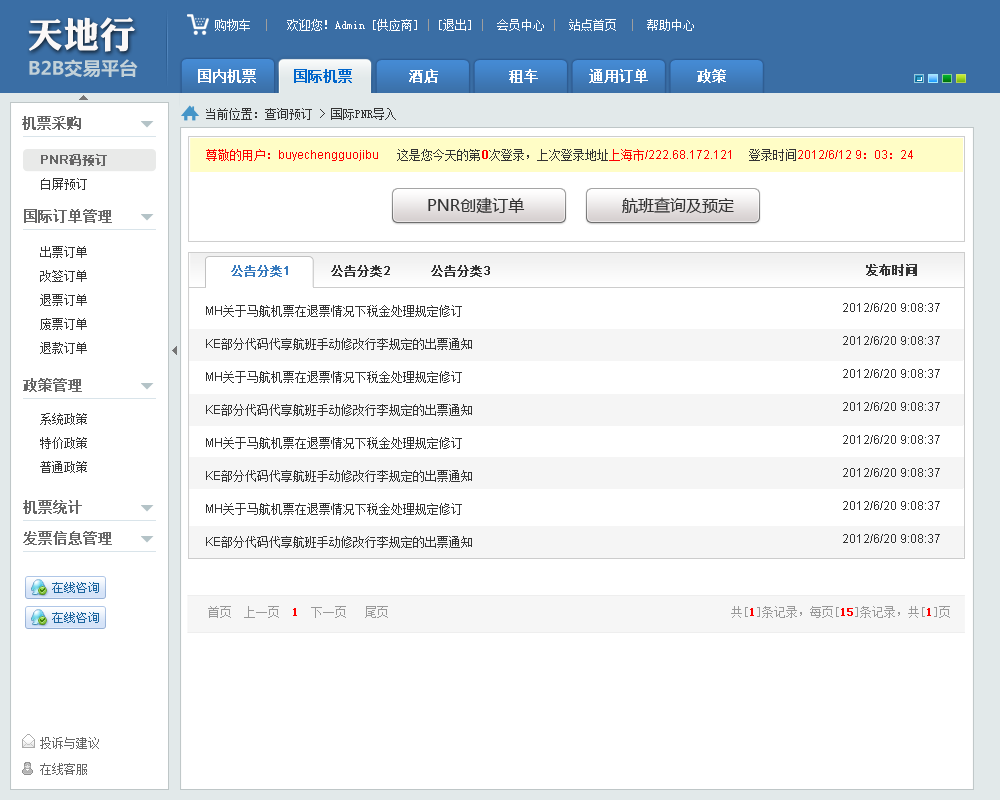
<style>
.page{position:relative;width:1000px;height:800px;background:#ffffff}
.page>*{position:absolute;margin:0}
.t1{font:36.2px "DFPLiJinHeiW8";color:#faf7f7}
.t2{font:12px "SimSun";color:#ffffff}
.t3{font:12px "SimSun";color:#9e9e9e}
.t4{font:18.3px "MicrosoftYaHei-Bold";color:#c2d1d8}
.t5{font:14px "SimSun";color:#ffffff;font-weight:bold}
.t6{font:14px "SimSun";color:#0066cc;font-weight:bold}
.t7{font:12px "SimSun";color:#333333}
.t8{font:14px "SimSun";color:#666666;font-weight:bold}
.t9{font:12px "ArialMT";color:#ff0000}
.t10{font:12px "SimSun";color:#ff0000}
.t11{font:12px "ArialMT";color:#ff0000;font-weight:bold}
.t12{font:12px/24px "SimSun";color:#333333}
.t13{font:12px/24px "ArialMT";color:#666666;font-weight:bold}
.t14{font:12px/24px "SimSun";color:#666666;font-weight:bold}
.t15{font:16px "MicrosoftYaHei";color:#333333}
.t16{font:12px "SimSun";color:#377abe;font-weight:bold}
.t17{font:12px "ArialMT";color:#377abe;font-weight:bold}
.t18{font:12px "SimSun";color:#333333;font-weight:bold}
.t19{font:12px "ArialMT";color:#333333;font-weight:bold}
.t20{font:12px/33px "SimSun";color:#333333}
.t21{font:12px/33px "ArialMT";color:#333333}
.t22{font:12px "SimSun";color:#999999}
.t23{font:12px "SimSun";color:#ff0000;font-weight:bold}
.t24{font:12px/26px "SimSun";color:#666666}
</style>
<div class="page">
<p class="t1" style="left:28px;top:17px;width:107px;height:35px">天地行</p>
<p class="t2" style="left:215px;top:19px;width:35px;height:12px">购物车</p>
<p class="t2" style="left:266px;top:19px;width:428px;height:12px"><span class="t3">|   </span>欢迎您！Admin [供应商]<span class="t3"> | </span>[退出] <span class="t3">|</span>  会员中心 <span class="t3">|</span>  站点首页  <span class="t3">|</span>  帮助中心</p>
<p class="t4" style="left:29px;top:59px;width:109px;height:19px">B2B交易平台</p>
<p class="t5" style="left:198px;top:69px;width:528px;height:14px">国内机票    <span class="t6">国际机票</span>     酒店     租车     通用订单      政策</p>
<p class="t7" style="left:206px;top:108px;width:190px;height:12px">当前位置：查询预订 &gt; 国际PNR导入</p>
<p class="t8" style="left:22px;top:116px;width:59px;height:14px">机票采购</p>
<p class="t9" style="left:206px;top:149px;width:707px;height:12px"><span class="t10">尊敬的用户：</span>buyechengguojibu      <span class="t7">这是您今天的第</span><span class="t11">0</span><span class="t7">次登录，上次登录地址</span><span class="t10">上海市</span>/222.68.172.121     <span class="t7">登录时间</span>2012/6/12 9<span class="t10">：</span>03<span class="t10">：</span>24</p>
<p class="t12" style="left:41px;top:154px;width:66px;height:36px"><span class="t13">PNR</span><span class="t14">码预订<br></span>白屏预订</p>
<p class="t15" style="left:428px;top:197px;width:97px;height:17px">PNR创建订单</p>
<p class="t15" style="left:622px;top:197px;width:112px;height:16px">航班查询及预定</p>
<p class="t8" style="left:24px;top:209px;width:88px;height:14px">国际订单管理</p>
<p class="t12" style="left:40px;top:246px;width:47px;height:108px">出票订单<br>改签订单<br>退票订单<br>废票订单<br>退款订单</p>
<p class="t16" style="left:231px;top:265px;width:259px;height:12px">公告分类<span class="t17">1          </span><span class="t18">公告分类</span><span class="t19">2          </span><span class="t18">公告分类</span><span class="t19">3</span></p>
<p class="t18" style="left:866px;top:264px;width:51px;height:12px">发布时间</p>
<p class="t20" style="left:206px;top:305px;width:266px;height:243px"><span class="t21">MH</span>关于马航机票在退票情况下税金处理规定修订<span class="t21"><br>KE</span>部分代码代享航班手动修改行李规定的出票通知<br><span class="t21">MH</span>关于马航机票在退票情况下税金处理规定修订<span class="t21"><br>KE</span>部分代码代享航班手动修改行李规定的出票通知<br><span class="t21">MH</span>关于马航机票在退票情况下税金处理规定修订<span class="t21"><br>KE</span>部分代码代享航班手动修改行李规定的出票通知<br><span class="t21">MH</span>关于马航机票在退票情况下税金处理规定修订<span class="t21"><br>KE</span>部分代码代享航班手动修改行李规定的出票通知</p>
<p class="t21" style="left:843px;top:303px;width:97px;height:240px;text-align:right">2012/6/20 9:08:37<br>2012/6/20 9:08:37<br>2012/6/20 9:08:37<br>2012/6/20 9:08:37<br>2012/6/20 9:08:37<br>2012/6/20 9:08:37<br>2012/6/20 9:08:37<br>2012/6/20 9:08:37</p>
<p class="t8" style="left:23px;top:378px;width:59px;height:14px">政策管理</p>
<p class="t12" style="left:40px;top:413px;width:47px;height:60px">系统政策<br>特价政策<br>普通政策</p>
<p class="t8" style="left:23px;top:500px;width:59px;height:14px">机票统计</p>
<p class="t8" style="left:23px;top:531px;width:89px;height:14px">发票信息管理</p>
<p class="t22" style="left:208px;top:606px;width:742px;height:12px">首页  上一页  <span class="t23">1</span>  下一页   尾页                                                         共[<span class="t23">1</span>]条记录，每页[<span class="t23">15</span>]条记录，共[<span class="t23">1</span>]页</p>
<p class="t24" style="left:40px;top:737px;width:59px;height:38px">投诉与建议 <br>在线客服</p>
</div>
